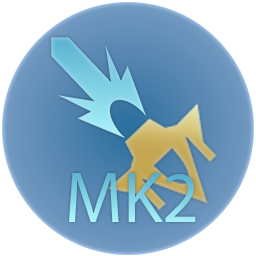
<style>
.page{position:relative;width:256px;height:256px;background:#ffffff}
.page>*{position:absolute;margin:0}
.t1{font:72px "MyriadPro-Regular"}
</style>
<div class="page">
<p class="t1" style="left:69px;top:173px;width:127px;height:49px">MK2</p>
</div>
